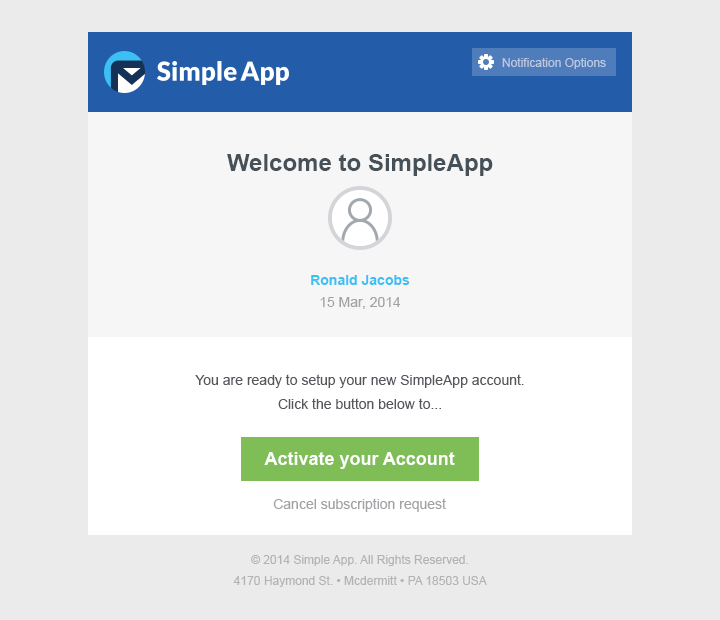
<style>
.page{position:relative;width:720px;height:620px;background:#ebebeb}
.page>*{position:absolute;margin:0}
.t1{font:12px "ArialMT";color:#bcc8df}
.t2{font:24px "Arial-BoldMT";color:#465059}
.t3{font:14px "Arial-BoldMT";color:#3cbff3}
.t4{font:14px "ArialMT";color:#a1a2a5}
.t5{font:14px/24px "ArialMT";color:#54565c}
.t6{font:18px "Arial-BoldMT";color:#ffffff}
.t7{font:12px/21px "ArialMT";color:#b3b3b3}
</style>
<div class="page">
<p class="t1" style="left:502px;top:58px;width:104px;height:11px">Notification Options</p>
<p class="t2" style="left:227px;top:154px;width:266px;height:22px">Welcome to SimpleApp</p>
<p class="t3" style="left:311px;top:275px;width:99px;height:34px;text-align:center">Ronald Jacobs<br><span class="t4">15 Mar, 2014</span></p>
<p class="t5" style="left:195px;top:374px;width:329px;height:35px;text-align:center">You are ready to setup your new SimpleApp account.<br>Click the button below to...</p>
<p class="t6" style="left:264px;top:452px;width:191px;height:17px">Activate your Account</p>
<p class="t4" style="left:273px;top:498px;width:173px;height:14px">Cancel subscription request</p>
<p class="t7" style="left:233px;top:555px;width:254px;height:32px;text-align:center">© 2014 Simple App. All Rights Reserved.<br>4170 Haymond St. • Mcdermitt • PA 18503 USA</p>
</div>
